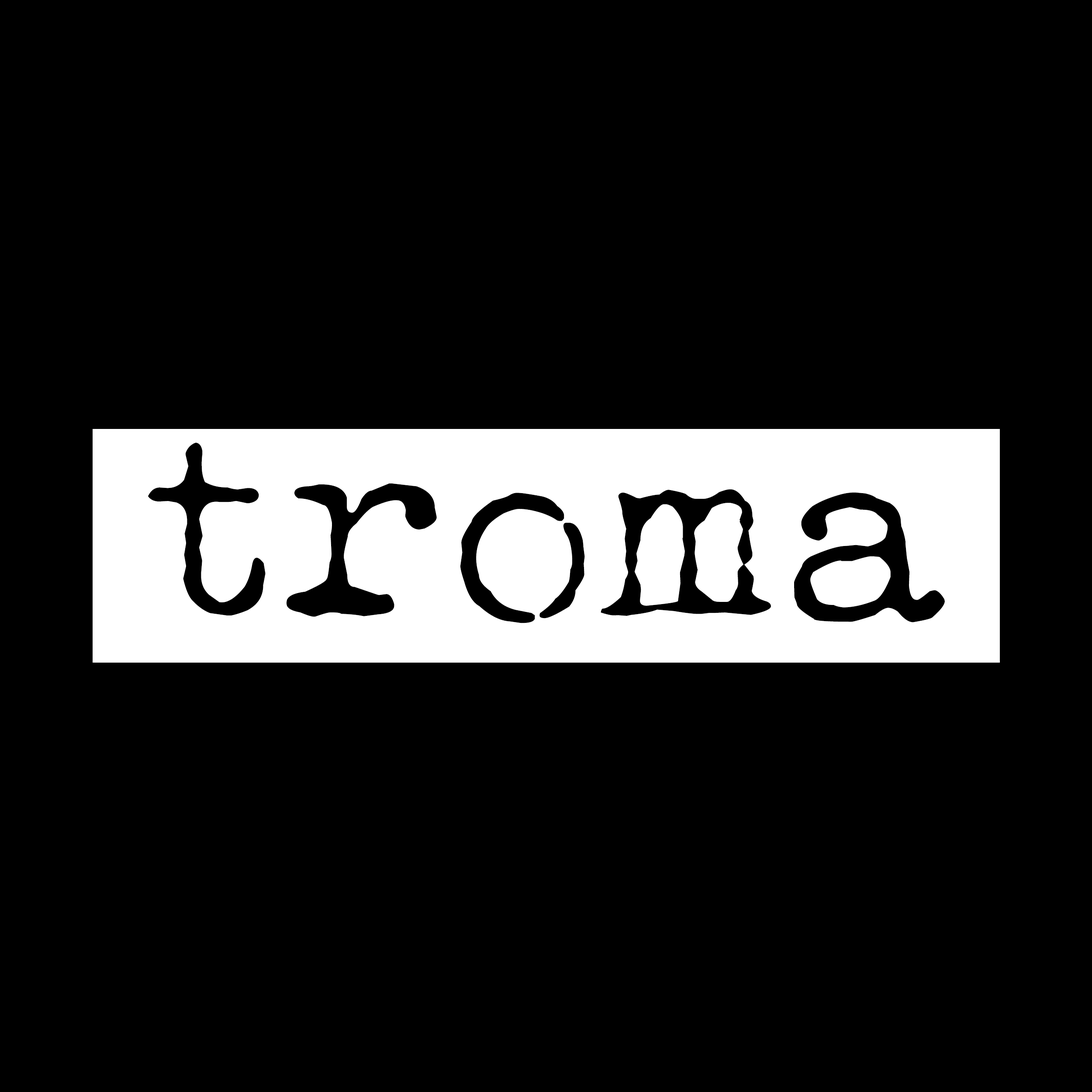
<style>
.page{position:relative;width:1092px;height:1092px;background:#000000}
.page>*{position:absolute;margin:0}
.t1{font:245.2px "LUCKYTYPEWRITER";color:#000000}
</style>
<div class="page">
<p class="t1" style="left:148px;top:442px;width:797px;height:181px">troma</p>
</div>
